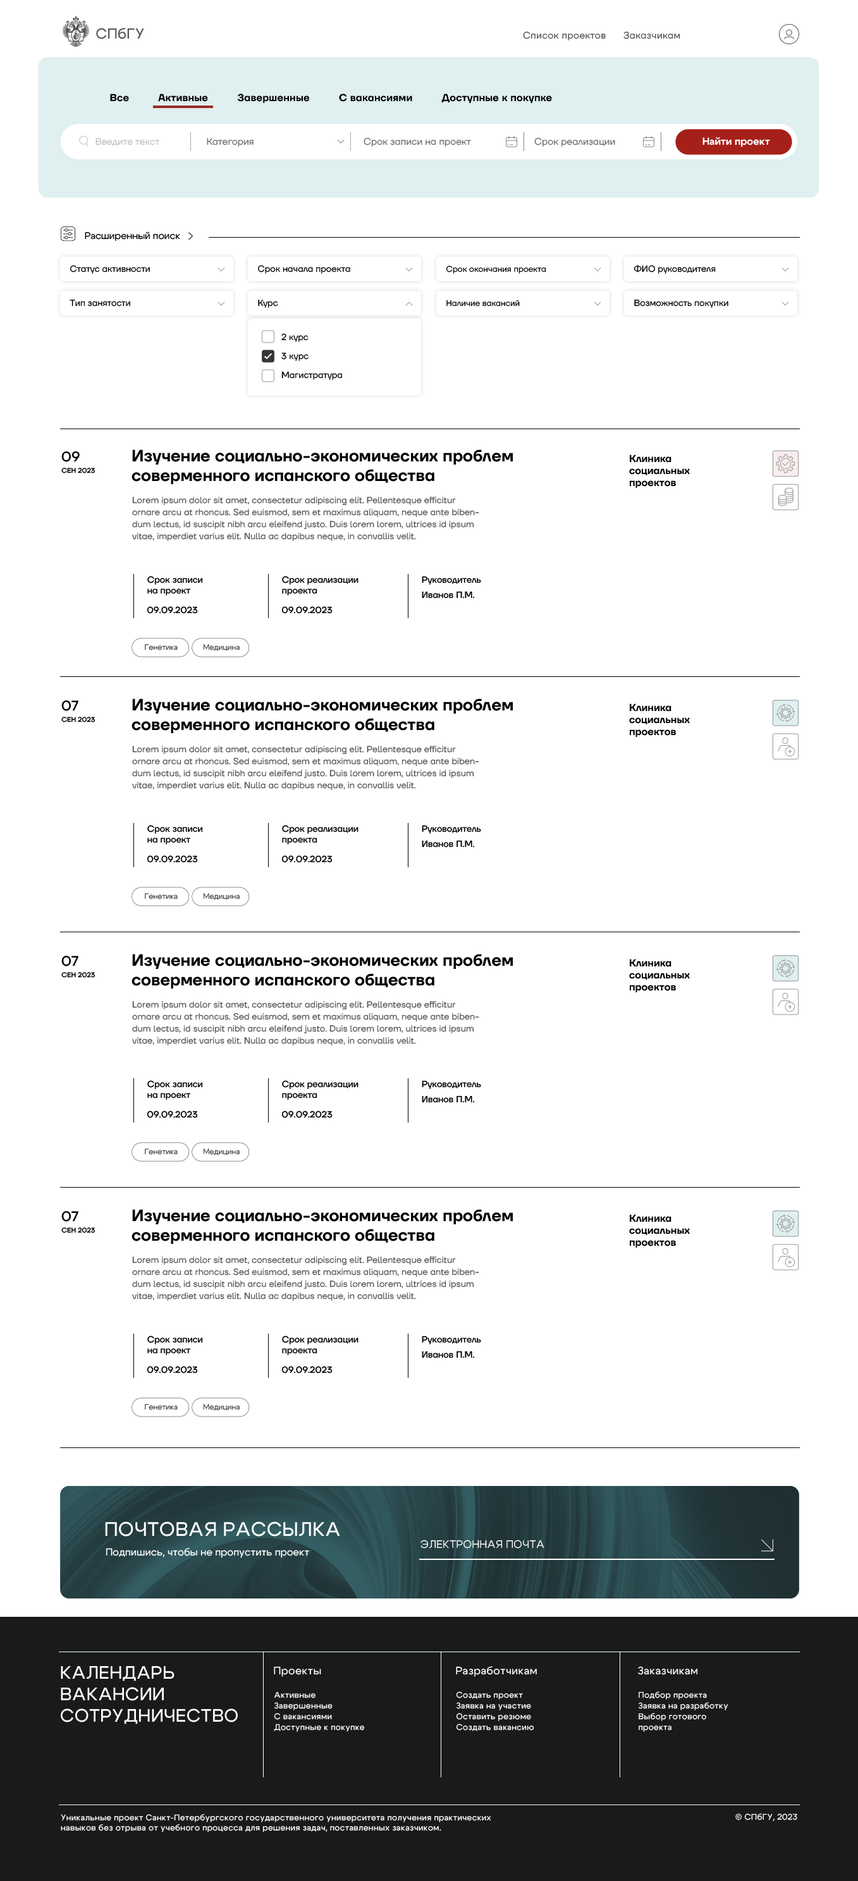
<style>
.page{position:relative;width:858px;height:1881px;background:#ffffff}
.page>*{position:absolute;margin:0}
.t1{font:14.3px "Cygre-Medium";letter-spacing:0.025em;color:#555555}
.t2{font:9.5px "TTFirsNeue-Regular";letter-spacing:0.025em;color:#555555}
.t3{font:10.1px "TTFirsNeue-DemiBold";letter-spacing:0.01em;color:#000000}
.t4{font:9.5px "TTFirsNeue-Regular";color:#c2c2c2}
.t5{font:9.5px "TTFirsNeue-Regular";color:#707070}
.t6{font:10.1px "Cygre-Bold";color:#ffffff}
.t7{font:9.5px "Cygre-Regular";letter-spacing:0.01em;color:#000000}
.t8{font:8.9px "TTFirsNeue-Regular";color:#000000}
.t9{font:8.2px "TTFirsNeue-Regular";color:#000000}
.t10{font:8.9px/19px "TTFirsNeue-Regular";color:#000000}
.t11{font:16.4px "TTFirsNeue-DemiBold";color:#000000}
.t12{font:14px "TTFirsNeue-Medium";color:#000000}
.t13{font:10.1px "TTFirsNeue-DemiBold";color:#000000}
.t14{font:6.8px "TTFirsNeue-Medium";color:#000000}
.t15{font:8.9px/12px "TTFirsNeue-Regular";color:#545456}
.t16{font:9px "TTFirsNeue-Medium";color:#000000}
.t17{font:9px/15.2px "TTFirsNeue-Medium";color:#000000}
.t18{font:7.6px "Cygre-Regular";color:#414141}
.t19{font:19.5px "Cygre-Medium";letter-spacing:0.025em;color:#ffffff}
.t20{font:10.7px "Cygre-Regular";letter-spacing:0.025em;color:#ffffff}
.t21{font:10.1px "Cygre-Medium";color:#ffffff}
.t22{font:18px "Cygre-Medium";letter-spacing:0.025em;color:#ffffff}
.t23{font:10.7px "Cygre-Medium";letter-spacing:0.025em;color:#ffffff}
.t24{font:8.3px/10.7px "Cygre-Medium";letter-spacing:0.025em;color:#ffffff}
.t25{font:8.3px "Cygre-Medium";letter-spacing:0.025em;color:#ffffff}
</style>
<div class="page">
<p class="t1" style="left:96px;top:27px;width:48px;height:12px">СПбГУ</p>
<p class="t2" style="left:523px;top:32px;width:157px;height:8px">Список проектов      Заказчикам</p>
<p class="t3" style="left:110px;top:94px;width:442px;height:9px">Все          Активные          Завершенные          С вакансиями          Доступные к покупке</p>
<p class="t4" style="left:95px;top:138px;width:65px;height:8px">Введите текст</p>
<p class="t5" style="left:207px;top:138px;width:47px;height:9px">Категория</p>
<p class="t5" style="left:364px;top:138px;width:107px;height:9px">Срок записи на проект</p>
<p class="t5" style="left:534px;top:138px;width:81px;height:9px">Срок реализации</p>
<p class="t6" style="left:702px;top:137px;width:68px;height:10px">Найти проект</p>
<p class="t7" style="left:85px;top:231px;width:95px;height:10px">Расширенный поиск</p>
<p class="t8" style="left:70px;top:265px;width:80px;height:9px">Статус активности</p>
<p class="t8" style="left:258px;top:265px;width:92px;height:9px">Срок начала проекта</p>
<p class="t9" style="left:446px;top:266px;width:100px;height:8px">Срок окончания проекта</p>
<p class="t8" style="left:633px;top:265px;width:83px;height:9px">ФИО руководителя</p>
<p class="t8" style="left:70px;top:300px;width:60px;height:7px">Тип занятости</p>
<p class="t8" style="left:258px;top:300px;width:20px;height:8px">Курс</p>
<p class="t9" style="left:446px;top:300px;width:74px;height:7px">Наличие вакансий</p>
<p class="t8" style="left:634px;top:300px;width:94px;height:8px">Возможность покупки</p>
<p class="t10" style="left:281px;top:333px;width:61px;height:47px">2 курс<br>3 курс<br>Магистратура</p>
<p class="t11" style="left:131px;top:449px;width:382px;height:35px">Изучение социально-экономических проблем соверменного испанского общества</p>
<p class="t12" style="left:61px;top:451px;width:19px;height:11px">09</p>
<p class="t13" style="left:629px;top:455px;width:61px;height:33px">Клиника<br>социальных<br>проектов</p>
<p class="t14" style="left:61px;top:468px;width:34px;height:6px">СЕН 2023</p>
<p class="t15" style="left:132px;top:497px;width:347px;height:44px">Lorem ipsum dolor sit amet, consectetur adipiscing elit. Pellentesque efficitur ornare arcu at rhoncus. Sed euismod, sem et maximus aliquam, neque ante bibendum lectus, id suscipit nibh arcu eleifend justo. Duis lorem lorem, ultrices id ipsum vitae, imperdiet varius elit. Nulla ac dapibus neque, in convallis velit.</p>
<p class="t16" style="left:147px;top:576px;width:56px;height:20px">Срок записи<br>на проект</p>
<p class="t16" style="left:282px;top:576px;width:76px;height:20px">Срок реализации<br>проекта</p>
<p class="t16" style="left:422px;top:576px;width:59px;height:23px">Руководитель<br><span class="t17">Иванов П.М.</span></p>
<p class="t16" style="left:147px;top:606px;width:51px;height:8px">09.09.2023</p>
<p class="t16" style="left:281px;top:606px;width:52px;height:8px">09.09.2023</p>
<p class="t18" style="left:145px;top:644px;width:33px;height:7px">Генетика</p>
<p class="t18" style="left:203px;top:644px;width:37px;height:7px">Медицина</p>
<p class="t12" style="left:61px;top:700px;width:17px;height:11px">07</p>
<p class="t11" style="left:131px;top:699px;width:382px;height:34px">Изучение социально-экономических проблем соверменного испанского общества</p>
<p class="t13" style="left:629px;top:704px;width:61px;height:33px">Клиника<br>социальных<br>проектов</p>
<p class="t14" style="left:61px;top:717px;width:34px;height:6px">СЕН 2023</p>
<p class="t15" style="left:132px;top:746px;width:347px;height:44px">Lorem ipsum dolor sit amet, consectetur adipiscing elit. Pellentesque efficitur ornare arcu at rhoncus. Sed euismod, sem et maximus aliquam, neque ante bibendum lectus, id suscipit nibh arcu eleifend justo. Duis lorem lorem, ultrices id ipsum vitae, imperdiet varius elit. Nulla ac dapibus neque, in convallis velit.</p>
<p class="t16" style="left:147px;top:825px;width:56px;height:20px">Срок записи<br>на проект</p>
<p class="t16" style="left:282px;top:825px;width:76px;height:20px">Срок реализации<br>проекта</p>
<p class="t16" style="left:422px;top:825px;width:59px;height:23px">Руководитель<br><span class="t17">Иванов П.М.</span></p>
<p class="t16" style="left:147px;top:855px;width:51px;height:8px">09.09.2023</p>
<p class="t16" style="left:281px;top:855px;width:52px;height:8px">09.09.2023</p>
<p class="t18" style="left:145px;top:893px;width:33px;height:7px">Генетика</p>
<p class="t18" style="left:203px;top:893px;width:37px;height:7px">Медицина</p>
<p class="t11" style="left:131px;top:954px;width:382px;height:35px">Изучение социально-экономических проблем соверменного испанского общества</p>
<p class="t12" style="left:61px;top:956px;width:17px;height:11px">07</p>
<p class="t13" style="left:629px;top:959px;width:61px;height:34px">Клиника<br>социальных<br>проектов</p>
<p class="t14" style="left:61px;top:972px;width:34px;height:6px">СЕН 2023</p>
<p class="t15" style="left:132px;top:1001px;width:347px;height:45px">Lorem ipsum dolor sit amet, consectetur adipiscing elit. Pellentesque efficitur ornare arcu at rhoncus. Sed euismod, sem et maximus aliquam, neque ante bibendum lectus, id suscipit nibh arcu eleifend justo. Duis lorem lorem, ultrices id ipsum vitae, imperdiet varius elit. Nulla ac dapibus neque, in convallis velit.</p>
<p class="t16" style="left:147px;top:1080px;width:56px;height:20px">Срок записи<br>на проект</p>
<p class="t16" style="left:282px;top:1080px;width:76px;height:20px">Срок реализации<br>проекта</p>
<p class="t16" style="left:422px;top:1080px;width:59px;height:23px">Руководитель<br><span class="t17">Иванов П.М.</span></p>
<p class="t16" style="left:147px;top:1111px;width:51px;height:7px">09.09.2023</p>
<p class="t16" style="left:281px;top:1111px;width:52px;height:7px">09.09.2023</p>
<p class="t18" style="left:145px;top:1149px;width:33px;height:6px">Генетика</p>
<p class="t18" style="left:203px;top:1149px;width:37px;height:7px">Медицина</p>
<p class="t12" style="left:61px;top:1211px;width:17px;height:11px">07</p>
<p class="t11" style="left:131px;top:1209px;width:382px;height:35px">Изучение социально-экономических проблем соверменного испанского общества</p>
<p class="t13" style="left:629px;top:1214px;width:61px;height:34px">Клиника<br>социальных<br>проектов</p>
<p class="t14" style="left:61px;top:1228px;width:34px;height:5px">СЕН 2023</p>
<p class="t15" style="left:132px;top:1257px;width:347px;height:44px">Lorem ipsum dolor sit amet, consectetur adipiscing elit. Pellentesque efficitur ornare arcu at rhoncus. Sed euismod, sem et maximus aliquam, neque ante bibendum lectus, id suscipit nibh arcu eleifend justo. Duis lorem lorem, ultrices id ipsum vitae, imperdiet varius elit. Nulla ac dapibus neque, in convallis velit.</p>
<p class="t16" style="left:147px;top:1336px;width:56px;height:19px">Срок записи<br>на проект</p>
<p class="t16" style="left:282px;top:1336px;width:76px;height:19px">Срок реализации<br>проекта</p>
<p class="t16" style="left:422px;top:1336px;width:59px;height:23px">Руководитель<br><span class="t17">Иванов П.М.</span></p>
<p class="t16" style="left:147px;top:1366px;width:51px;height:8px">09.09.2023</p>
<p class="t16" style="left:281px;top:1366px;width:52px;height:8px">09.09.2023</p>
<p class="t18" style="left:145px;top:1404px;width:33px;height:6px">Генетика</p>
<p class="t18" style="left:203px;top:1404px;width:37px;height:7px">Медицина</p>
<p class="t19" style="left:105px;top:1522px;width:235px;height:15px">ПОЧТОВАЯ РАССЫЛКА</p>
<p class="t20" style="left:420px;top:1540px;width:124px;height:9px">ЭЛЕКТРОННАЯ ПОЧТА</p>
<p class="t21" style="left:106px;top:1548px;width:203px;height:10px">Подпишись, чтобы не пропустить проект</p>
<p class="t22" style="left:61px;top:1666px;width:177px;height:59px">КАЛЕНДАРЬ<br>ВАКАНСИИ<br>СОТРУДНИЧЕСТВО</p>
<p class="t23" style="left:274px;top:1666px;width:47px;height:11px">Проекты</p>
<p class="t23" style="left:456px;top:1666px;width:81px;height:11px">Разработчикам</p>
<p class="t23" style="left:638px;top:1666px;width:60px;height:9px">Заказчикам</p>
<p class="t24" style="left:274px;top:1692px;width:91px;height:40px">Активные<br>Завершенные<br>С вакансиями<br>Доступные к покупке</p>
<p class="t24" style="left:456px;top:1692px;width:78px;height:40px">Создать проект<br>Заявка на участие<br>Оставить резюме<br>Создать вакансию</p>
<p class="t24" style="left:639px;top:1692px;width:89px;height:40px">Подбор проекта<br>Заявка на разработку<br>Выбор готового<br>проекта</p>
<p class="t25" style="left:61px;top:1814px;width:430px;height:19px">Уникальные проект Санкт-Петербургского государственного университета получения практических навыков без отрыва от учебного процесса для решения задач, поставленных заказчиком.</p>
<p class="t25" style="left:735px;top:1814px;width:62px;height:8px">© СПбГУ, 2023</p>
</div>
